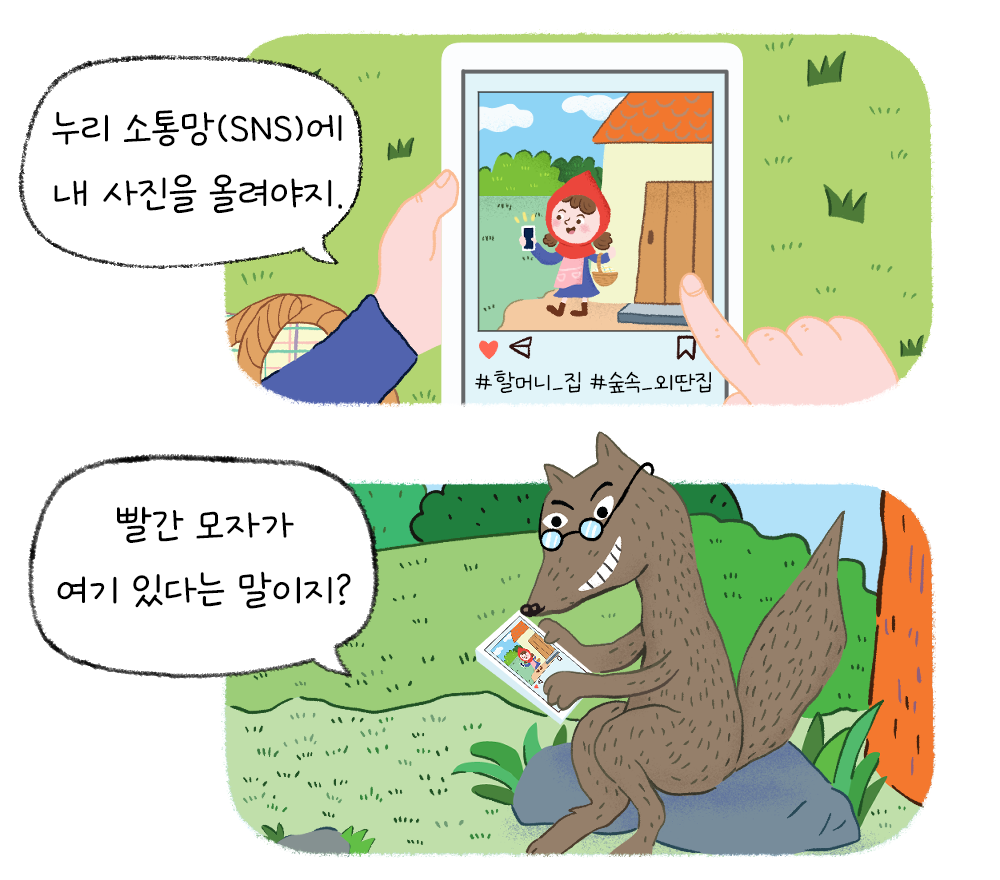
<style>
.page{position:relative;width:1000px;height:880px;background:#ffffff}
.page>*{position:absolute;margin:0}
.t1{font:54.2px "GangwonEduSaeeumMedium";color:#000000}
</style>
<div class="page">
<p class="t1" style="left:52px;top:110px;width:290px;height:104px;text-align:center">누리 소통망(SNS)에<br>내 사진을 올려야지.</p>
<p class="t1" style="left:57px;top:506px;width:294px;height:103px;text-align:center">빨간 모자가<br>여기 있다는 말이지?</p>
</div>
